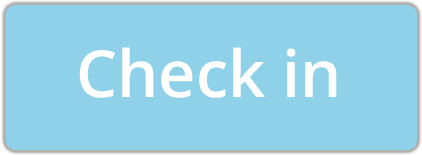
<style>
.page{position:relative;width:422px;height:155px;background:#8fd1e9}
.page>*{position:absolute;margin:0}
.t1{font:65px "OpenSans-Semibold";color:#ffffff}
</style>
<div class="page">
<p class="t1" style="left:79px;top:47px;width:258px;height:51px">Check in</p>
</div>
